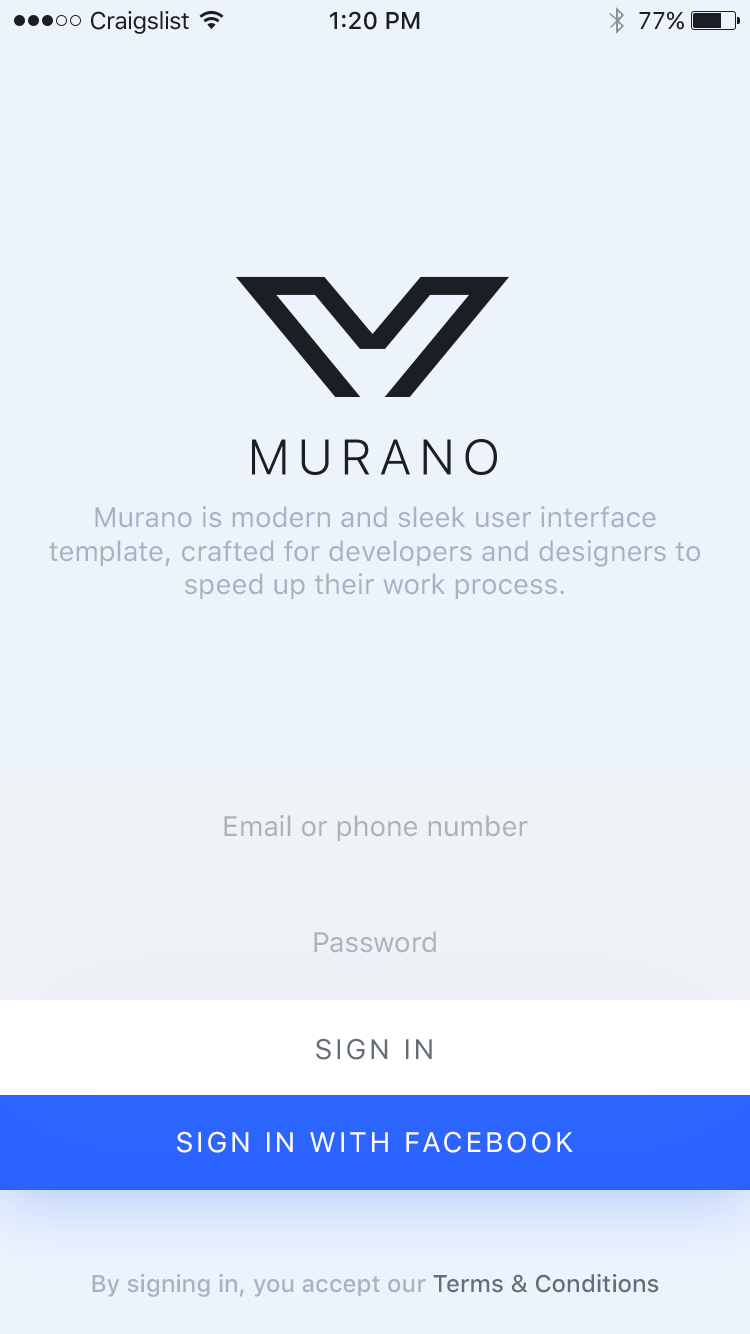
<style>
.page{position:relative;width:750px;height:1334px;background:#ecf3fd}
.page>*{position:absolute;margin:0}
.t1{font:24px "SFUIText-Regular";letter-spacing:-0.025em;color:#1b1e23}
.t2{font:24px "SFUIText-Medium";color:#1b1e23}
.t3{font:24px "SFUIText-Regular";color:#1b1e23}
.t4{font:28px "SFUIText-Regular";color:#aab2bd}
.t5{font:28px "SFUIText-Regular";letter-spacing:0.1em;color:#656d78;text-transform:uppercase}
.t6{font:28px "SFUIText-Regular";letter-spacing:0.1em;color:#ffffff;text-transform:uppercase}
.t7{font:24px "SFUIText-Medium";color:#aab2bd}
.t8{font:24px "SFUIText-Medium";color:#656d78}
</style>
<div class="page">
<p class="t1" style="left:91px;top:11px;width:98px;height:23px">Craigslist</p>
<p class="t2" style="left:330px;top:11px;width:90px;height:19px">1:20 PM</p>
<p class="t3" style="left:639px;top:11px;width:45px;height:19px">77%</p>
<p class="t4" style="left:49px;top:506px;width:651px;height:93px;text-align:center">Murano is modern and sleek user interface template, crafted for developers and designers to speed up their work process.</p>
<p class="t4" style="left:224px;top:815px;width:304px;height:26px">Email or phone number</p>
<p class="t4" style="left:314px;top:931px;width:122px;height:22px">Password</p>
<p class="t5" style="left:316px;top:1038px;width:116px;height:22px">Sign in</p>
<p class="t6" style="left:177px;top:1131px;width:396px;height:22px">Sign in with Facebook</p>
<p class="t7" style="left:92px;top:1274px;width:567px;height:23px">By signing in, you accept our <span class="t8">Terms &amp; Conditions</span></p>
</div>
